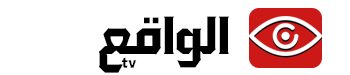
<style>
.page{position:relative;width:350px;height:75px;background:#ffffff}
.page>*{position:absolute;margin:0}
.t1{font:56.6px "DGModal3at";color:#000000}
.t2{font:15.2px "DGModal3at";color:#000000}
</style>
<div class="page">
<p class="t1" style="left:99px;top:16px;width:130px;height:57px">الواقع</p>
<p class="t2" style="left:122px;top:57px;width:15px;height:11px">tv</p>
</div>
